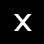
<style>
.page{position:relative;width:44px;height:44px;background:#000000}
.page>*{position:absolute;margin:0}
.t1{font:36px "GillSans";letter-spacing:-0.005em;color:#ffffff}
</style>
<div class="page">
<p class="t1" style="left:14px;top:14px;width:18px;height:17px">x</p>
</div>
